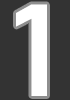
<style>
.page{position:relative;width:70px;height:100px;background:#333333}
.page>*{position:absolute;margin:0}
.t1{font:128.8px "Bahnschrift";color:#ffffff;scale:1.2 1}
</style>
<div class="page">
<p class="t1" style="left:16px;top:4px;width:31px;height:92px">1</p>
</div>
